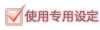
<style>
.page{position:relative;width:100px;height:30px;background:#ffffff}
.page>*{position:absolute;margin:0}
.t1{font:12px "SourceHanSansSC-Regular";color:#906d6e;font-weight:bold}
</style>
<div class="page">
<p class="t1" style="left:25px;top:10px;width:74px;height:12px">使用专用设定</p>
</div>
